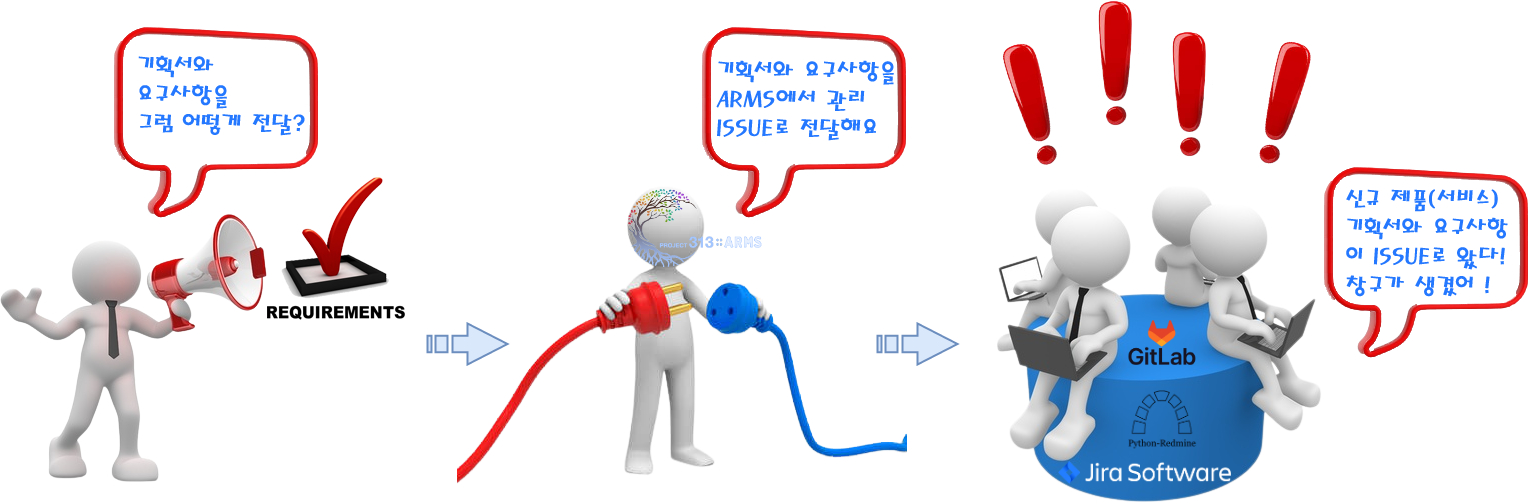
<style>
.page{position:relative;width:1528px;height:503px;background:#ffffff}
.page>*{position:absolute;margin:0}
.t1{font:24px "MagicR-HM";color:#2477ff}
</style>
<div class="page">
<p class="t1" style="left:138px;top:55px;width:167px;height:81px">기획서와 <br>요구사항을<br>그럼 어떻게 전달?</p>
<p class="t1" style="left:716px;top:60px;width:178px;height:81px">기획서와 요구사항을<br>ARMS에서 관리<br>ISSUE로 전달해요</p>
<p class="t1" style="left:1346px;top:189px;width:162px;height:108px">신규 제품(서비스)<br>기획서와 요구사항<br>이 ISSUE로 왔다!<br>창구가 생겼어 !</p>
</div>
